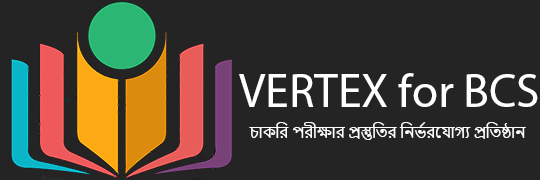
<style>
.page{position:relative;width:540px;height:180px;background:#242424}
.page>*{position:absolute;margin:0}
.t1{font:47.4px "MyriadPro-Regular";color:#ffffff}
.t2{font:14.8px "NirmalaUI";color:#ffffff}
</style>
<div class="page">
<p class="t1" style="left:239px;top:73px;width:299px;height:34px">VERTEX for BCS</p>
<p class="t2" style="left:249px;top:122px;width:277px;height:18px">চাকরি পরীক্ষার প্রস্তুতির নির্ভরযোগ্য প্রতিষ্ঠান</p>
</div>
